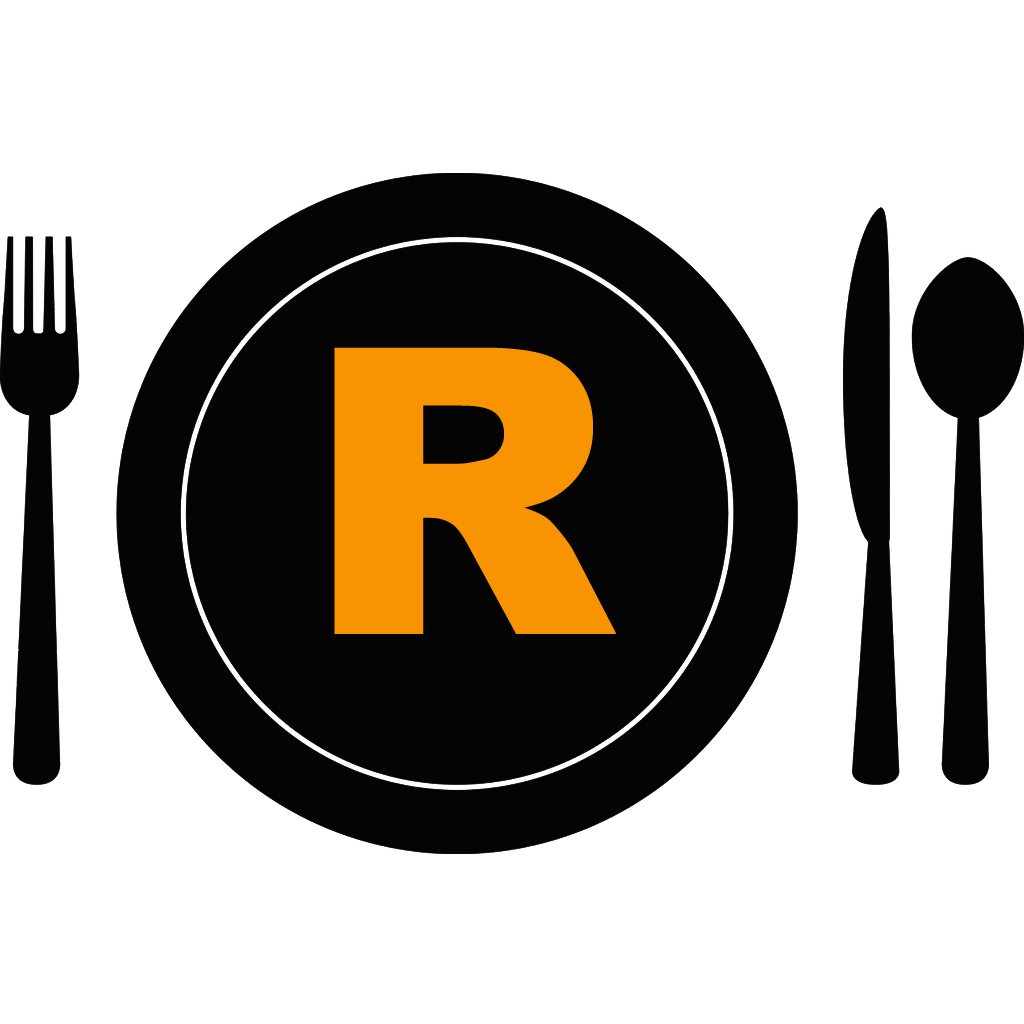
<style>
.page{position:relative;width:1024px;height:1024px;background:#ffffff}
.page>*{position:absolute;margin:0}
.t1{font:400px "Arial-Black";color:#f89302}
</style>
<div class="page">
<p class="t1" style="left:334px;top:347px;width:283px;height:287px">R</p>
</div>
